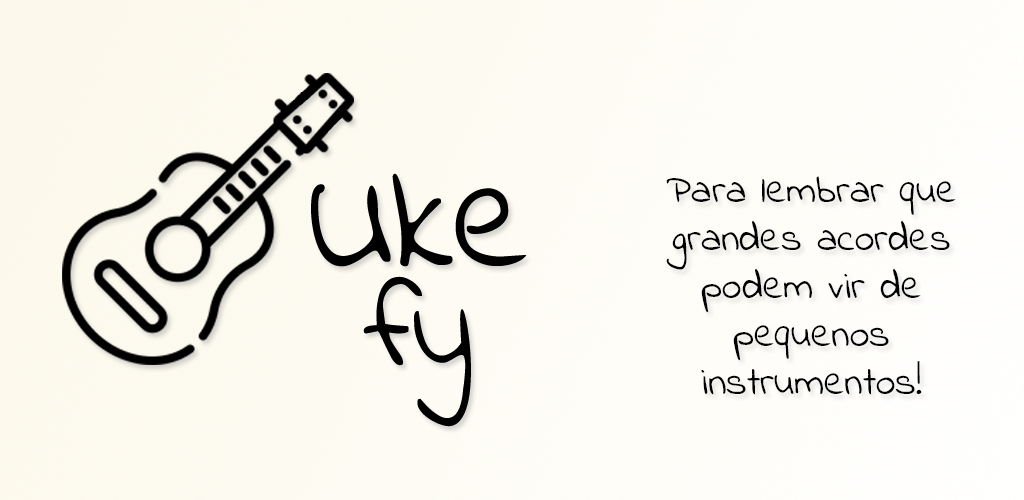
<style>
.page{position:relative;width:1024px;height:500px}
.page>*{position:absolute;margin:0}
.t1{font:40px "IndieFlower";color:#000000}
</style>
<div class="page">
<p class="t1" style="left:666px;top:176px;width:290px;height:219px;text-align:center">Para lembrar que grandes acordes podem vir de pequenos instrumentos!</p>
</div>
